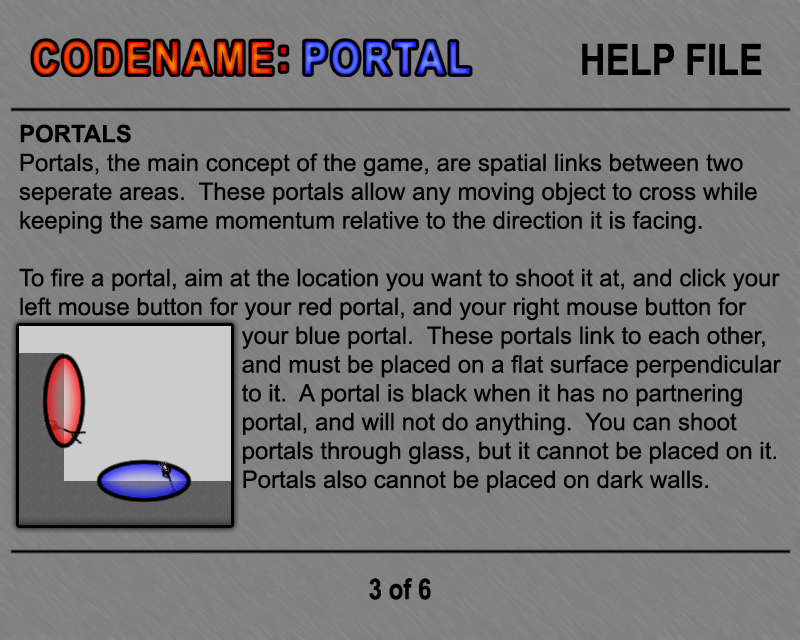
<style>
.page{position:relative;width:800px;height:640px;background:#808080}
.page>*{position:absolute;margin:0}
.t1{font:43.2px "Arial-BoldMT";color:#000000;scale:0.83 1}
.t2{font:24px "ArialMT";color:#000000}
.t3{font:24px "Arial-BoldMT";color:#000000}
.t4{font:28.8px "Arial-BoldMT";color:#000000;scale:0.83 1}
</style>
<div class="page">
<p class="t1" style="left:582px;top:43px;width:180px;height:32px">HELP FILE</p>
<p class="t2" style="left:19px;top:124px;width:763px;height:369px"><span class="t3">PORTALS<br></span>Portals, the main concept of the game, are spatial links between two seperate areas.  These portals allow any moving object to cross while keeping the same momentum relative to the direction it is facing.  <br><br>To fire a portal, aim at the location you want to shoot it at, and click your left mouse button for your red portal, and your right mouse button for         your blue portal.  These portals link to each other,        and must be placed on a flat surface perpendicular        to it.  A portal is black when it has no partnering        portal, and will not do anything.  You can shoot         portals through glass, but it cannot be placed on it.        Portals also cannot be placed on dark walls.</p>
<p class="t4" style="left:369px;top:578px;width:62px;height:22px">3 of 6</p>
</div>
